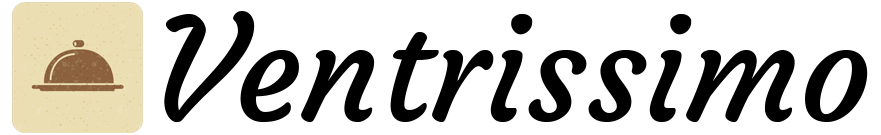
<style>
.page{position:relative;width:881px;height:135px;background:#ffffff}
.page>*{position:absolute;margin:0}
.t1{font:140px "Courgette-Regular";color:#000000}
</style>
<div class="page">
<p class="t1" style="left:164px;top:11px;width:704px;height:111px">Ventrissimo</p>
</div>
